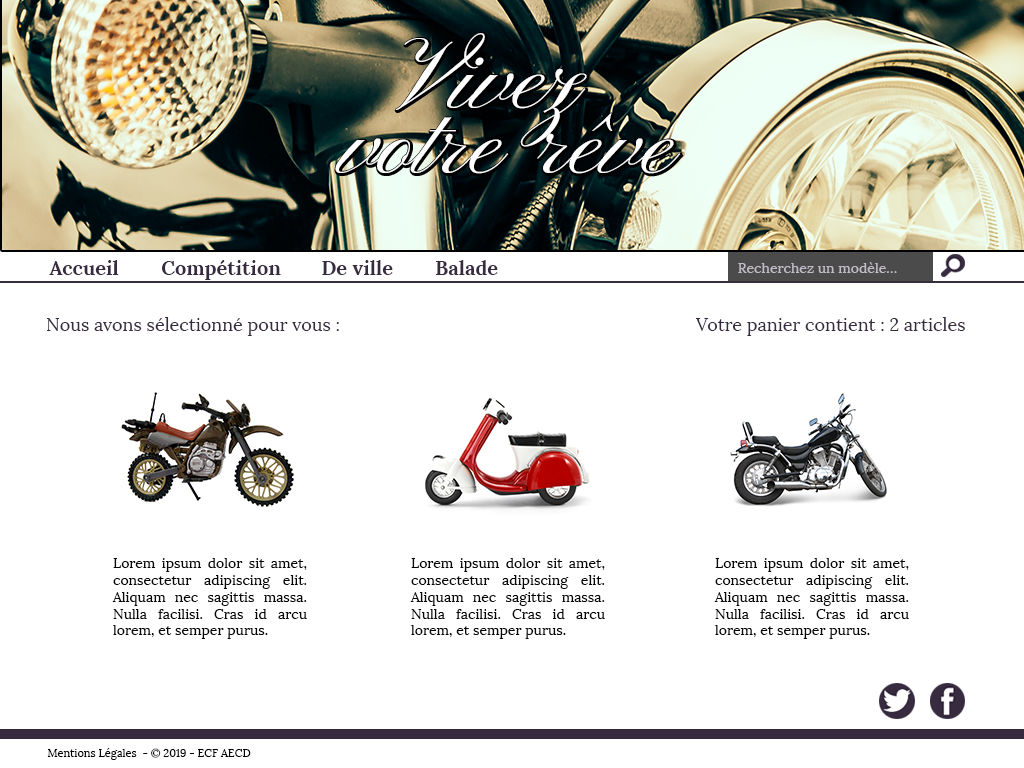
<style>
.page{position:relative;width:1024px;height:768px;background:#ffffff}
.page>*{position:absolute;margin:0}
.t1{font:100px/65px "PinyonScript";color:#ffffff}
.t2{font:100px "PinyonScript";color:#ffffff}
.t3{font:20px "Lora-Bold";color:#372b3f}
.t4{font:14px "Lora-Regular";color:#c2bcc7}
.t5{font:18px "Lora-Regular";color:#372b3f}
.t6{font:14px "Lora-Regular";color:#070707}
.t7{font:11px "Lora-Regular";color:#000000}
</style>
<div class="page">
<p class="t1" style="left:335px;top:33px;width:346px;height:141px;text-align:center"><span class="t2">Vivez </span><br>votre rêve</p>
<p class="t3" style="left:49px;top:260px;width:70px;height:15px">Accueil</p>
<p class="t3" style="left:162px;top:260px;width:119px;height:20px">Compétition</p>
<p class="t3" style="left:322px;top:260px;width:71px;height:15px">De ville</p>
<p class="t3" style="left:436px;top:260px;width:62px;height:15px">Balade</p>
<p class="t4" style="left:738px;top:262px;width:159px;height:11px">Recherchez un modèle…</p>
<p class="t5" style="left:46px;top:317px;width:293px;height:19px">Nous avons sélectionné pour vous :</p>
<p class="t5" style="left:695px;top:317px;width:270px;height:19px">Votre panier contient : 2 articles</p>
<p class="t6" style="left:112px;top:558px;width:195px;height:81px;text-align:justify">Lorem ipsum dolor sit amet, consectetur adipiscing elit. Aliquam nec sagittis massa. Nulla facilisi. Cras id arcu lorem, et semper purus.</p>
<p class="t6" style="left:410px;top:558px;width:195px;height:81px;text-align:justify">Lorem ipsum dolor sit amet, consectetur adipiscing elit. Aliquam nec sagittis massa. Nulla facilisi. Cras id arcu lorem, et semper purus.</p>
<p class="t6" style="left:714px;top:558px;width:195px;height:81px;text-align:justify">Lorem ipsum dolor sit amet, consectetur adipiscing elit. Aliquam nec sagittis massa. Nulla facilisi. Cras id arcu lorem, et semper purus.</p>
<p class="t7" style="left:47px;top:748px;width:204px;height:12px">Mentions Légales  - © 2019 - ECF AECD</p>
</div>
